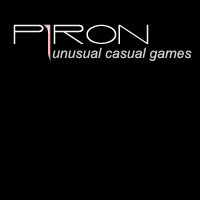
<style>
.page{position:relative;width:200px;height:200px;background:#000000}
.page>*{position:absolute;margin:0}
.t1{font:14px "Arial-ItalicMT";color:#cccccc}
</style>
<div class="page">
<p class="t1" style="left:52px;top:47px;width:140px;height:14px">unusual casual games</p>
</div>
